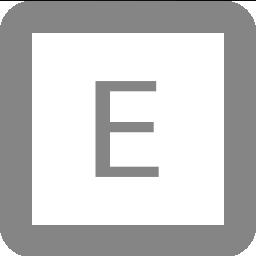
<style>
.page{position:relative;width:256px;height:256px;background:#ffffff}
.page>*{position:absolute;margin:0}
.t1{font:141.7px "MyriadPro-Regular";color:#858585;scale:1.18 1}
</style>
<div class="page">
<p class="t1" style="left:95px;top:80px;width:64px;height:96px">E</p>
</div>
